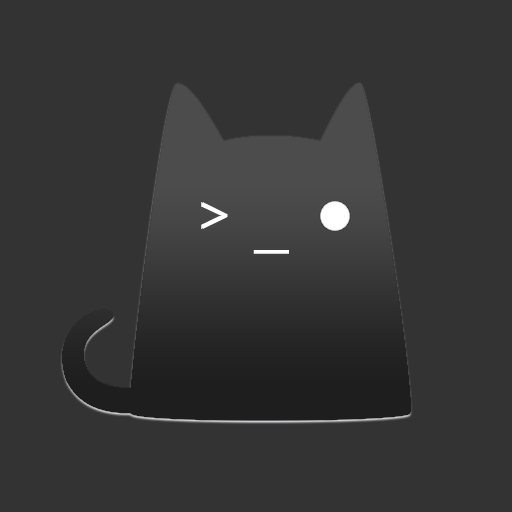
<style>
.page{position:relative;width:512px;height:512px;background:#333333}
.page>*{position:absolute;margin:0}
.t1{font:55px "NotoMono";color:#ffffff;font-weight:bold}
</style>
<div class="page">
<p class="t1" style="left:201px;top:202px;width:27px;height:28px">&gt;</p>
<p class="t1" style="left:253px;top:249px;width:37px;height:5px">_</p>
</div>
